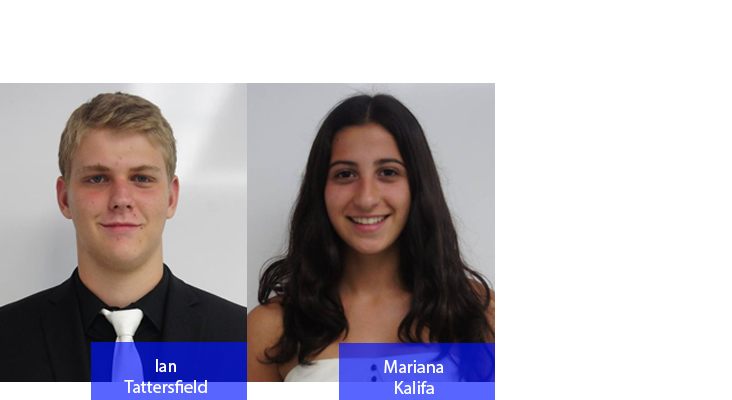
<style>
.page{position:relative;width:732px;height:400px;background:#ffffff}
.page>*{position:absolute;margin:0}
.t1{font:18px "MyriadPro-Regular";color:#ffffff}
</style>
<div class="page">
<p class="t1" style="left:124px;top:359px;width:83px;height:34px;text-align:center">Ian<br>Tattersfield</p>
<p class="t1" style="left:384px;top:360px;width:60px;height:34px;text-align:center">Mariana<br>Kalifa</p>
</div>
